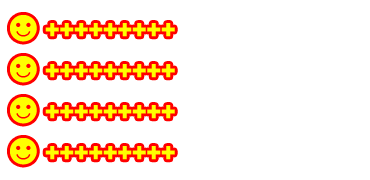
<style>
.page{position:relative;width:370px;height:180px;background:#ffffff}
.page>*{position:absolute;margin:0}
.t1{font:29px "Dummy";color:#ffff00}
</style>
<div class="page">
<p class="t1" style="left:45px;top:23px;width:130px;height:14px">+++++++++</p>
<p class="t1" style="left:45px;top:64px;width:130px;height:14px">+++++++++</p>
<p class="t1" style="left:45px;top:105px;width:130px;height:14px">+++++++++</p>
<p class="t1" style="left:45px;top:146px;width:130px;height:14px">+++++++++</p>
</div>
